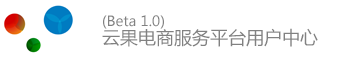
<style>
.page{position:relative;width:338px;height:58px;background:#ffffff}
.page>*{position:absolute;margin:0}
.t1{font:14px "MicrosoftYaHei";color:#818181}
.t2{font:18px "MicrosoftYaHei";color:#818181}
</style>
<div class="page">
<p class="t1" style="left:103px;top:15px;width:61px;height:14px">(Beta 1.0)</p>
<p class="t2" style="left:102px;top:28px;width:216px;height:19px">云果电商服务平台用户中心</p>
</div>
